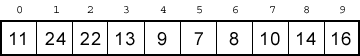
<style>
.page{position:relative;width:360px;height:56px;background:#ffffff}
.page>*{position:absolute;margin:0}
.t1{font:12px "Courier";letter-spacing:0.075em}
.t2{font:12px "Courier";letter-spacing:0.075em;color:#000000}
.t3{font:18px "ArialMT";letter-spacing:0.075em;color:#000000}
</style>
<div class="page">
<p class="t1" style="left:17px;top:6px;width:5px;height:8px">0</p>
<p class="t1" style="left:54px;top:6px;width:5px;height:7px">1</p>
<p class="t2" style="left:87px;top:6px;width:6px;height:7px">2</p>
<p class="t1" style="left:124px;top:6px;width:5px;height:8px">3</p>
<p class="t2" style="left:160px;top:6px;width:6px;height:7px">4</p>
<p class="t1" style="left:197px;top:6px;width:5px;height:8px">5</p>
<p class="t1" style="left:233px;top:6px;width:5px;height:8px">6</p>
<p class="t1" style="left:270px;top:6px;width:5px;height:7px">7</p>
<p class="t1" style="left:304px;top:6px;width:5px;height:8px">8</p>
<p class="t1" style="left:340px;top:6px;width:5px;height:8px">9</p>
<p class="t3" style="left:10px;top:32px;width:15px;height:13px">11</p>
<p class="t3" style="left:45px;top:32px;width:21px;height:13px">24</p>
<p class="t3" style="left:80px;top:32px;width:21px;height:13px">22</p>
<p class="t3" style="left:116px;top:32px;width:19px;height:14px">13</p>
<p class="t3" style="left:157px;top:32px;width:10px;height:14px">9</p>
<p class="t3" style="left:194px;top:32px;width:9px;height:13px">7</p>
<p class="t3" style="left:229px;top:32px;width:10px;height:14px">8</p>
<p class="t3" style="left:261px;top:32px;width:19px;height:14px">10</p>
<p class="t3" style="left:297px;top:32px;width:19px;height:13px">14</p>
<p class="t3" style="left:332px;top:32px;width:19px;height:14px">16</p>
</div>
